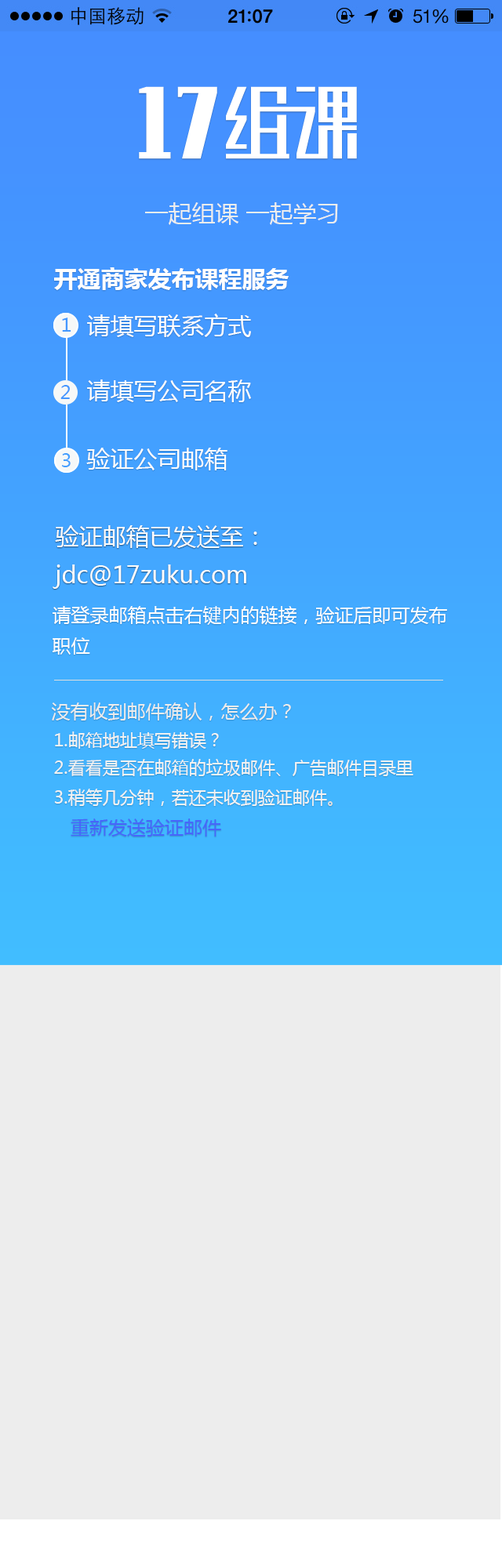
<style>
.page{position:relative;width:502px;height:1568px;background:#ededed}
.page>*{position:absolute;margin:0}
.t1{font:23.5px "MicrosoftYaHei";color:#ededed}
.t2{font:23.5px "MicrosoftYaHei-Bold";color:#fefefe}
.t3{font:18.8px "MicrosoftYaHei";color:#4498ff}
.t4{font:23.5px "MicrosoftYaHei";color:#fefefe}
.t5{font:18.8px "MicrosoftYaHei";color:#4497ff}
.t6{font:18.8px "MicrosoftYaHei";color:#449fff}
.t7{font:18.8px "MicrosoftYaHei";color:#fefefe}
.t8{font:18.8px "MicrosoftYaHei";color:#ececec}
.t9{font:17.2px "MicrosoftYaHei";color:#f2f2f2}
.t10{font:18.8px "MicrosoftYaHei";color:#dfdfdf}
.t11{font:18.8px "MicrosoftYaHei";color:#4765fb}
</style>
<div class="page">
<p class="t1" style="left:145px;top:202px;width:193px;height:23px">一起组课 一起学习</p>
<p class="t2" style="left:54px;top:267px;width:235px;height:23px">开通商家发布课程服务</p>
<p class="t3" style="left:62px;top:318px;width:9px;height:14px">1</p>
<p class="t4" style="left:87px;top:314px;width:164px;height:23px">请填写联系方式</p>
<p class="t5" style="left:60px;top:385px;width:10px;height:14px">2</p>
<p class="t4" style="left:87px;top:379px;width:164px;height:23px">请填写公司名称</p>
<p class="t4" style="left:86px;top:448px;width:141px;height:22px">验证公司邮箱</p>
<p class="t6" style="left:62px;top:453px;width:9px;height:14px">3</p>
<p class="t4" style="left:53px;top:525px;width:204px;height:64px">验证邮箱已发送至：<br>jdc@17zuku.com</p>
<p class="t7" style="left:53px;top:606px;width:394px;height:49px">请登录邮箱点击右键内的链接，验证后即可发布<br>职位</p>
<p class="t8" style="left:51px;top:702px;width:240px;height:18px">没有收到邮件确认，怎么办？</p>
<p class="t9" style="left:54px;top:731px;width:359px;height:106px">1.邮箱地址填写错误？<br>2.看看是否在邮箱的垃圾邮件、广告邮件目录里<br>3.稍等几分钟，若还未收到验证邮件<span class="t10">。<br>   </span><span class="t11">重新发送验证邮件</span></p>
</div>
